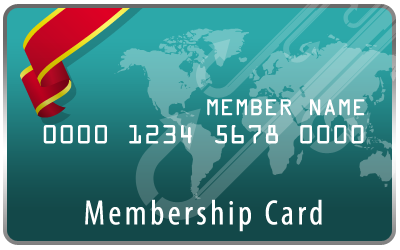
<style>
.page{position:relative;width:400px;height:250px}
.page>*{position:absolute;margin:0}
.t1{font:24.3px "OCRAExtended";color:#ffffff}
.t2{font:28.3px "OCRAExtended";color:#ffffff}
.t3{font:35.3px "MyriadPro-Cond";letter-spacing:0.1em;color:#ffffff}
</style>
<div class="page">
<p class="t1" style="left:207px;top:99px;width:158px;height:17px">MEMBER NAME</p>
<p class="t2" style="left:43px;top:125px;width:321px;height:19px">0000 1234 5678 0000</p>
<p class="t3" style="left:85px;top:199px;width:237px;height:33px">Membership Card</p>
</div>
